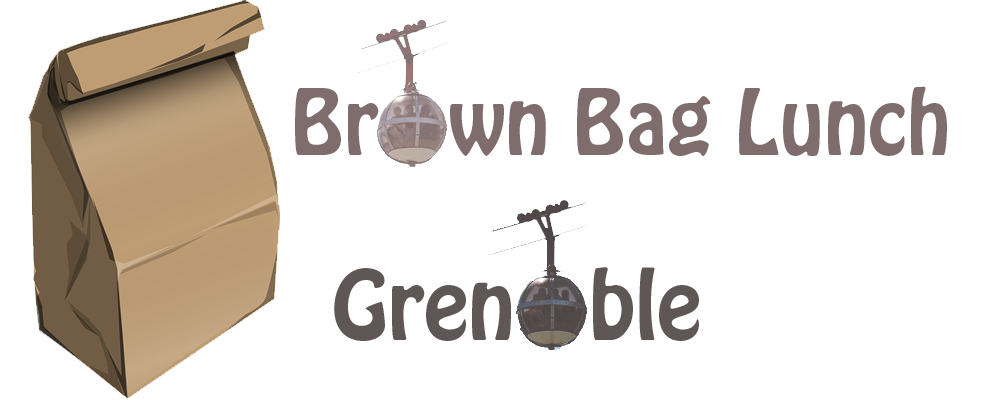
<style>
.page{position:relative;width:1000px;height:400px;background:#ffffff}
.page>*{position:absolute;margin:0}
.t1{font:80px "HoboStd";color:#7f6c6c}
.t2{font:85px "HoboStd";color:#5f5656}
</style>
<div class="page">
<p class="t1" style="left:295px;top:86px;width:652px;height:70px">Br   wn Bag Lunch</p>
<p class="t2" style="left:334px;top:267px;width:365px;height:74px">Gren   ble</p>
</div>
